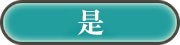
<style>
.page{position:relative;width:180px;height:45px}
.page>*{position:absolute;margin:0}
.t1{font:28px "RyuminPr6N-ExBold";color:#fdfbf9}
</style>
<div class="page">
<p class="t1" style="left:77px;top:9px;width:27px;height:27px">是</p>
</div>
